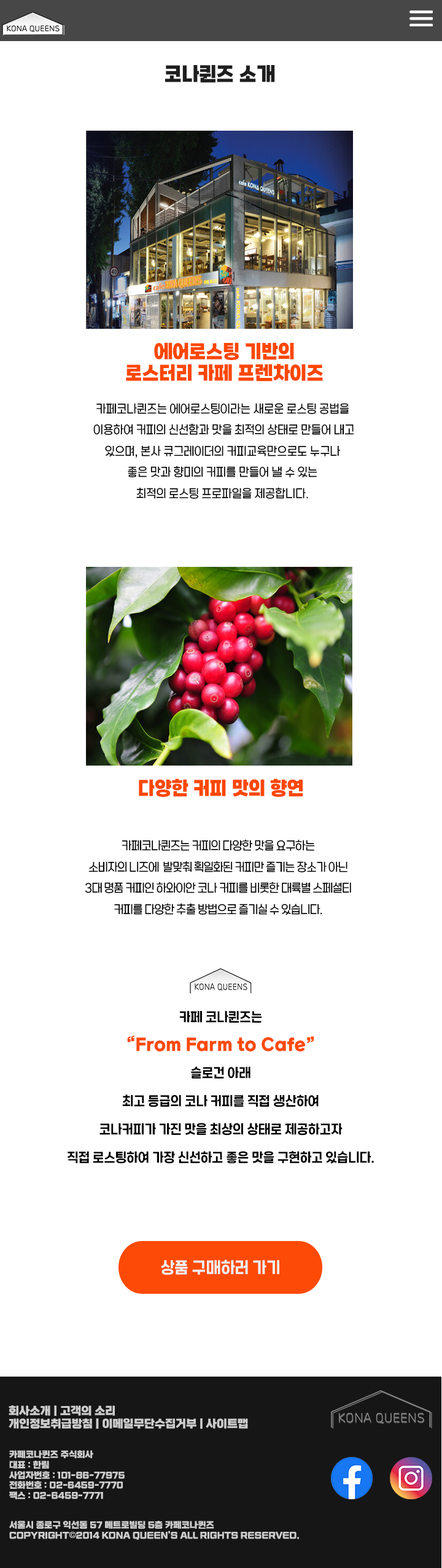
<style>
.page{position:relative;width:442px;height:1568px;background:#ffffff}
.page>*{position:absolute;margin:0}
.t1{font:20.2px "SBAggroB";color:#1e1e1e;scale:0.9 1}
.t2{font:19.5px/10.6px "SBAggroB";color:#fd4700;scale:0.9 1}
.t3{font:12.2px/21.2px "SBAggroL";color:#000000;scale:0.9 1}
.t4{font:19.6px "SBAggroB";color:#fd4700;scale:0.89 1}
.t5{font:12.2px/21.2px "SBAggroL";letter-spacing:-0.04em;color:#000000;scale:0.89 1}
.t6{font:13.5px/28.1px "SBAggroM";color:#000000;scale:0.9 1}
.t7{font:16.8px/28.1px "SBAggroB";color:#fd4a06;scale:0.9 1}
.t8{font:16.7px "SBAggroM";color:#efefef;scale:0.89 1}
.t9{font:11px "esamanruBold";color:#cdcdcd}
.t10{font:8.6px "esamanruBold";color:#cdcdcd}
.t11{font:8.6px "Gulim";color:#cdcdcd}
</style>
<div class="page">
<p class="t1" style="left:165px;top:65px;width:110px;height:18px">코나퀸즈 소개</p>
<p class="t2" style="left:126px;top:342px;width:197px;height:40px;text-align:center">에어로스팅 기반의 <br><br>로스터리 카페 프렌차이즈</p>
<p class="t3" style="left:93px;top:403px;width:261px;height:96px;text-align:center">카페코나퀸즈는 에어로스팅이라는 새로운 로스팅 공법을<br> 이용하여 커피의 신선함과 맛을 최적의 상태로 만들어 내고 <br>있으며, 본사 큐그레이더의 커피교육만으로도 누구나 <br>좋은 맛과 향미의 커피를 만들어 낼 수 있는 <br>최적의 로스팅 프로파일을 제공합니다.</p>
<p class="t4" style="left:139px;top:778px;width:164px;height:19px">다양한 커피 맛의 향연</p>
<p class="t5" style="left:85px;top:839px;width:266px;height:76px;text-align:center">카페코나퀸즈는 커피의 다양한 맛을 요구하는 <br>소비자의 니즈에  발맞춰 획일화된 커피만 즐기는 장소가 아닌 <br>3대 명품 커피인 하와이안 코나 커피를 비롯한 대륙별 스페셜티 <br>커피를 다양한 추출 방법으로 즐기실 수 있습니다.</p>
<p class="t6" style="left:67px;top:1011px;width:307px;height:153px;text-align:center">카페 코나퀸즈는 <br><span class="t7">“From Farm to Cafe” <br></span>슬로건 아래<br>최고 등급의 코나 커피를 직접 생산하여<br>코나커피가 가진 맛을 최상의 상태로 제공하고자<br>직접 로스팅하여 가장 신선하고 좋은 맛을 구현하고 있습니다.</p>
<p class="t8" style="left:161px;top:1259px;width:118px;height:16px">상품 구매하러 가기</p>
<p class="t9" style="left:9px;top:1405px;width:239px;height:24px">회사소개 | 고객의 소리 <br>개인정보취급방침 | 이메일무단수집거부 | 사이트맵</p>
<p class="t10" style="left:9px;top:1450px;width:290px;height:90px">카페코나퀸즈 주식회사   <br>대표 : 한림   <br>사업자번호 : 101-86-77975  <br>전화번호 : 02-6459-7770   <br>팩스 : 02-6459-7771<br><br><br>서울시 종로구 익선동 57 메트로빌딩 5층 카페코나퀸즈<br>COPYRIGHT<span class="t11">©</span>2014 KONA QUEEN'S ALL RIGHTS RESERVED.</p>
</div>
